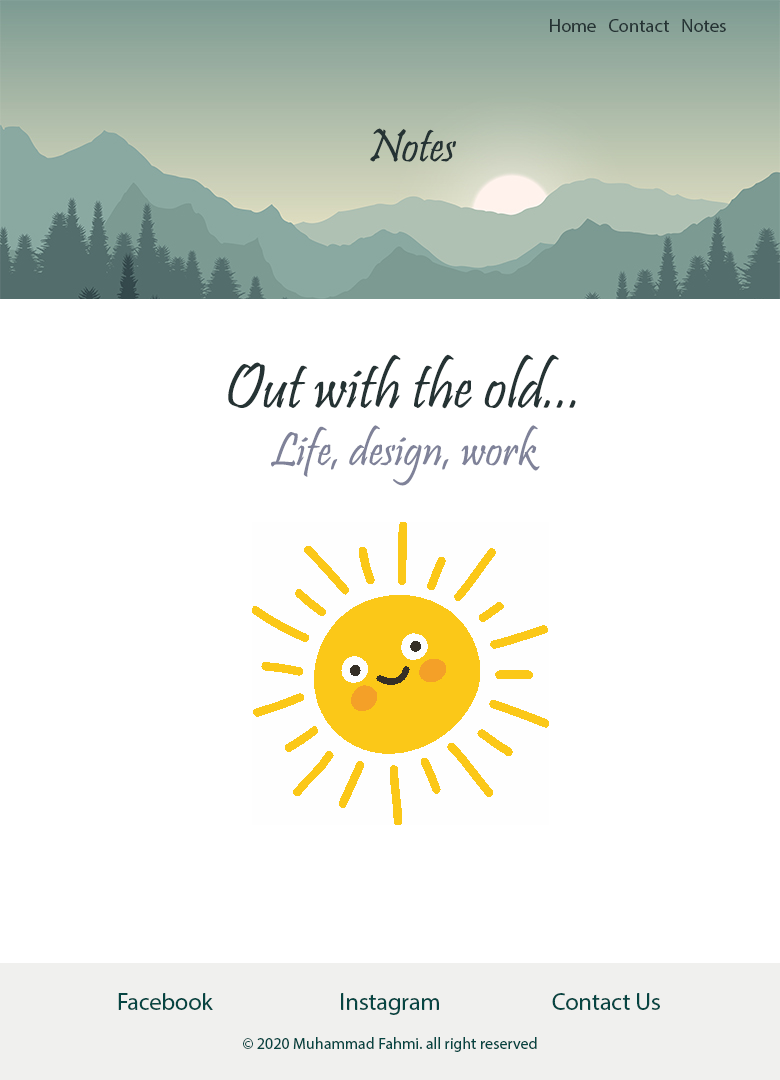
<style>
.page{position:relative;width:780px;height:1080px;background:#ffffff}
.page>*{position:absolute;margin:0}
.t1{font:18.7px "MyriadPro-Regular";color:#253334}
.t2{font:48px "Pristina-Regular";color:#253334}
.t3{font:64px "Pristina-Regular";color:#253334}
.t4{font:48px "Pristina-Regular";color:#7f8299}
.t5{font:12px "MyriadPro-Regular";color:#064542}
.t6{font:24px "MyriadPro-Regular";color:#064542}
</style>
<div class="page">
<p class="t1" style="left:550px;top:19px;width:176px;height:13px">Home   Contact   Notes</p>
<p class="t2" style="left:370px;top:128px;width:86px;height:34px">Notes</p>
<p class="t3" style="left:228px;top:354px;width:348px;height:132px;text-align:center">Out with the old...<br><span class="t4">Life, design, work</span></p>
<p class="t5" style="left:118px;top:993px;width:542px;height:59px;text-align:center"><span class="t6">Facebook       Instagram      Contact Us<br></span><br>© 2020 Muhammad Fahmi. all right reserved</p>
</div>
